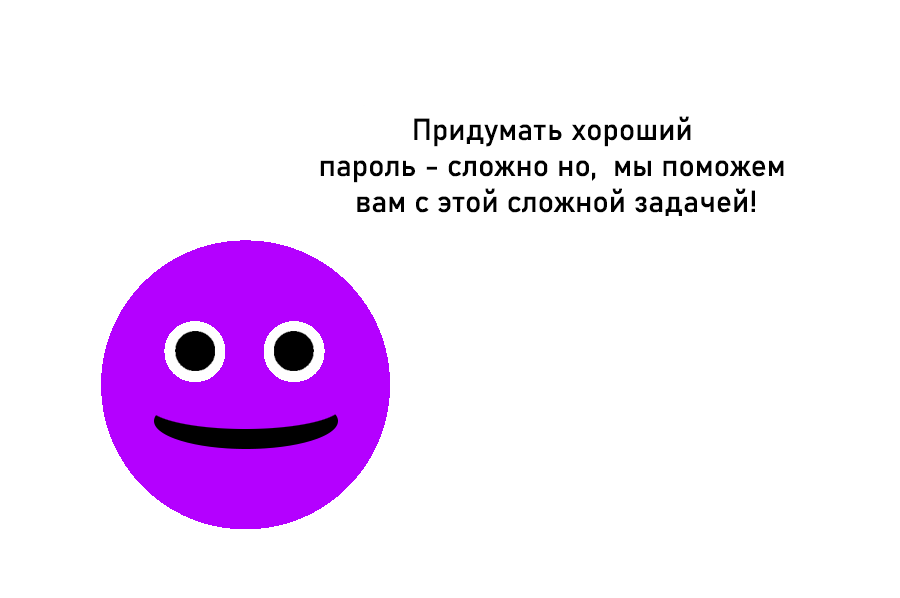
<style>
.page{position:relative;width:900px;height:598px;background:#ffffff}
.page>*{position:absolute;margin:0}
.t1{font:30px "Bahnschrift";color:#000000}
</style>
<div class="page">
<p class="t1" style="left:320px;top:116px;width:464px;height:100px;text-align:center">Придумать хороший <br>пароль - сложно но,  мы поможем <br>вам с этой сложной задачей!</p>
</div>
